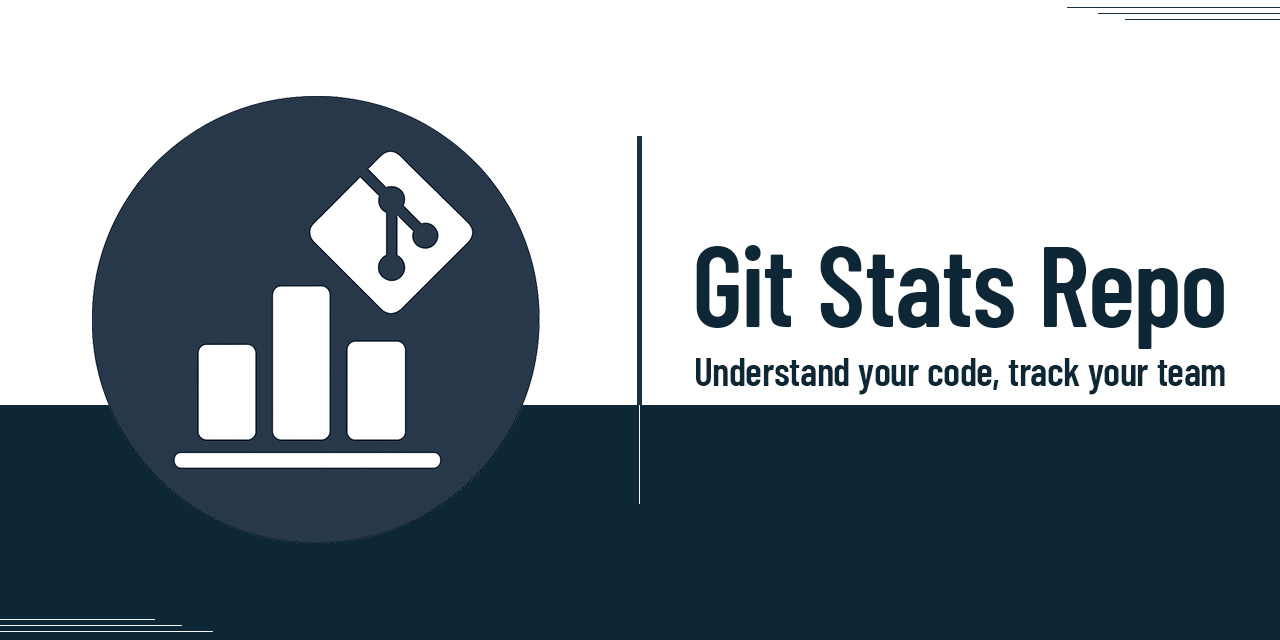
<style>
.page{position:relative;width:1280px;height:640px;background:#ffffff}
.page>*{position:absolute;margin:0}
.t1{font:113px "BarlowCondensed-SemiBold";color:#0d2736}
.t2{font:40.2px "BarlowCondensed-SemiBold";color:#0d2736}
</style>
<div class="page">
<p class="t1" style="left:696px;top:245px;width:528px;height:104px">Git Stats Repo</p>
<p class="t2" style="left:696px;top:358px;width:529px;height:37px">Understand your code, track your team</p>
</div>
